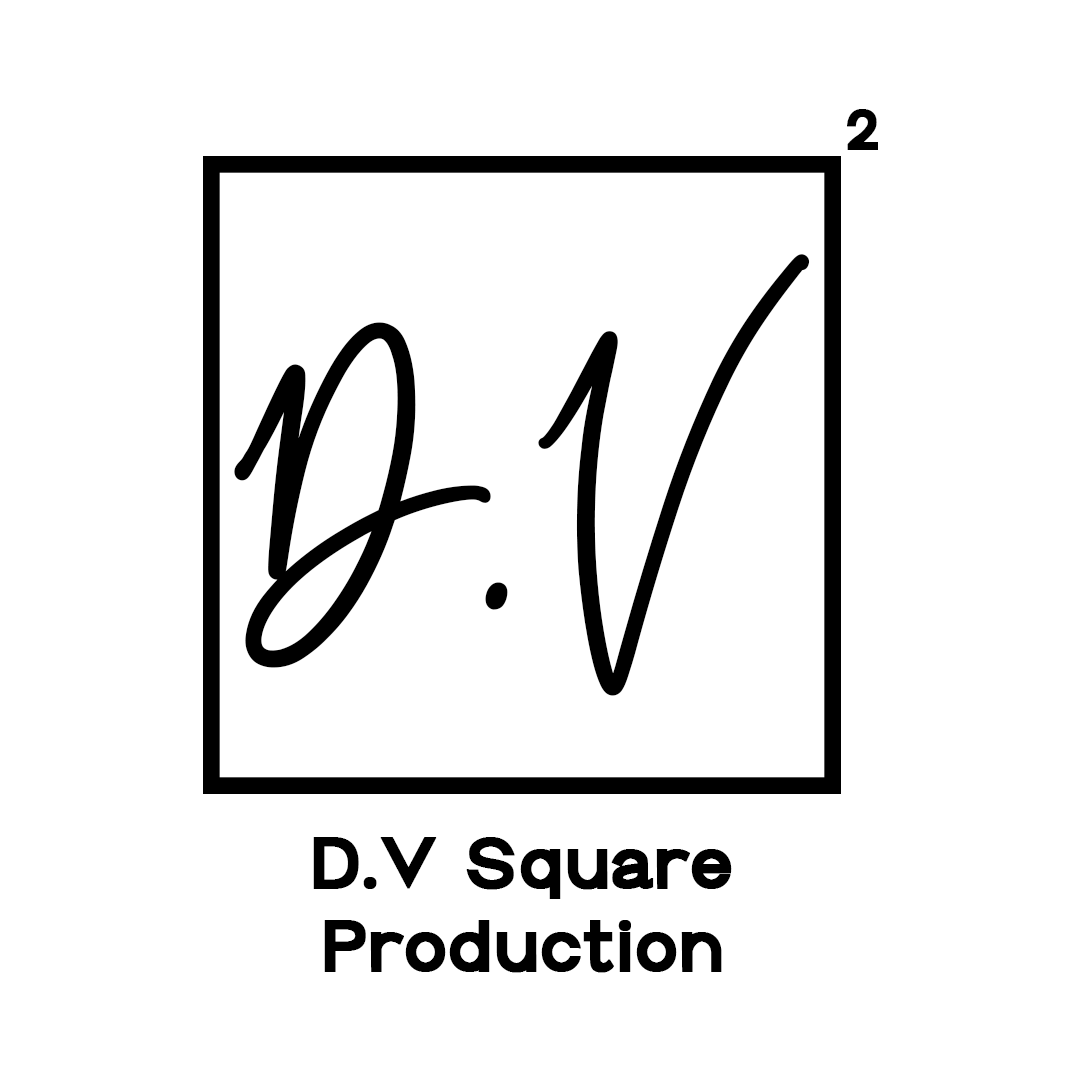
<style>
.page{position:relative;width:1080px;height:1080px;background:#ffffff}
.page>*{position:absolute;margin:0}
.t1{font:55.6px "Groteska-Bold";color:#000000;font-weight:bold}
.t2{font:333.3px "Sunstrike-Regular";color:#000000;font-weight:bold}
.t3{font:69.4px "Groteska-Bold";color:#000000;font-weight:bold}
</style>
<div class="page">
<p class="t1" style="left:847px;top:109px;width:31px;height:41px">2</p>
<p class="t2" style="left:234px;top:254px;width:576px;height:442px">D.V</p>
<p class="t3" style="left:313px;top:837px;width:419px;height:136px;text-align:center">D.V Square<br>Production</p>
</div>
